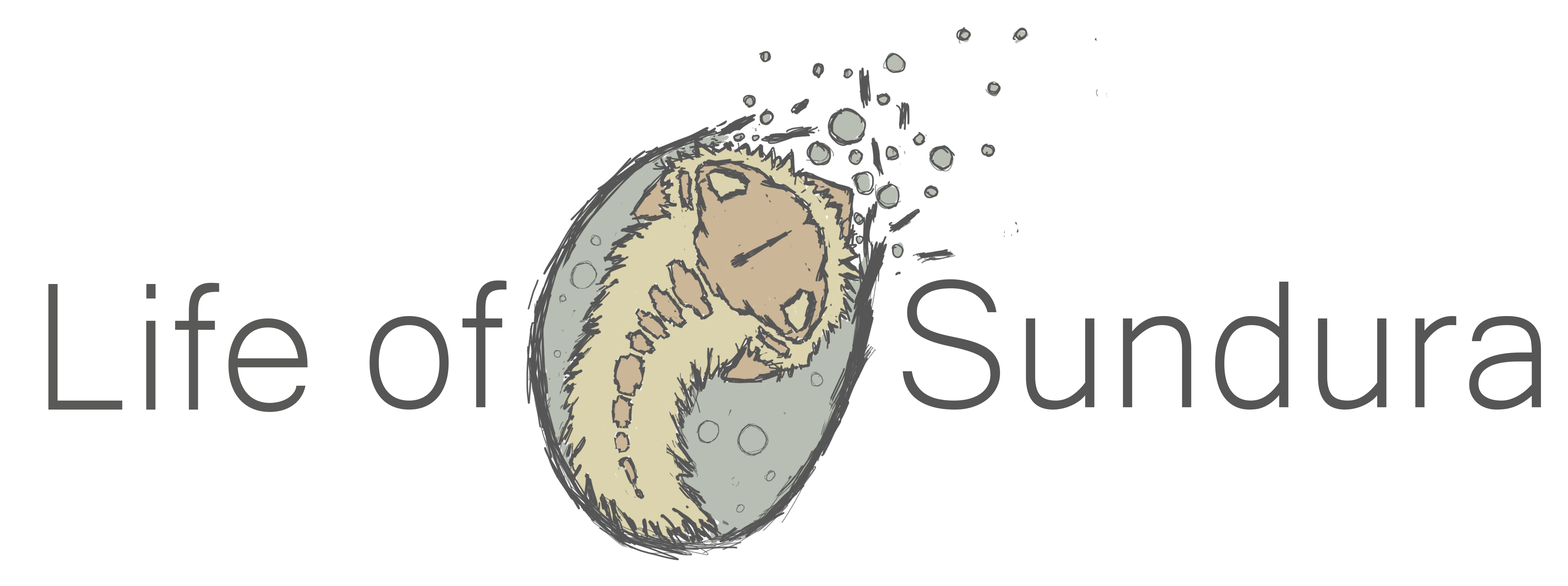
<style>
.page{position:relative;width:1568px;height:586px;background:#ffffff}
.page>*{position:absolute;margin:0}
.t1{font:234.6px "Microsoft-Yi-Baiti";color:#565656}
.t2{font:234.6px "Microsoft-Yi-Baiti";color:#595958}
</style>
<div class="page">
<p class="t1" style="left:369px;top:280px;width:138px;height:129px">of</p>
<p class="t1" style="left:903px;top:279px;width:638px;height:130px">Sundura</p>
<p class="t2" style="left:48px;top:283px;width:260px;height:129px">Life</p>
</div>
